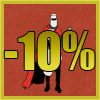
<style>
.page{position:relative;width:100px;height:100px}
.page>*{position:absolute;margin:0}
.t1{font:48px "Impact"}
</style>
<div class="page">
<p class="t1" style="left:4px;top:31px;width:91px;height:40px">-10%</p>
</div>
